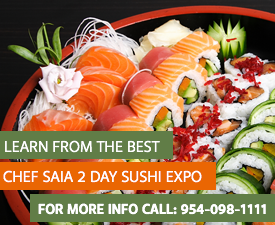
<style>
.page{position:relative;width:275px;height:225px}
.page>*{position:absolute;margin:0}
.t1{font:16px "Anago-Book";color:#ffffff}
.t2{font:14px "Anago-Bold";color:#ffffff}
</style>
<div class="page">
<p class="t1" style="left:5px;top:140px;width:155px;height:13px">LEARN FROM THE BEST</p>
<p class="t1" style="left:3px;top:170px;width:199px;height:13px">CHEF SAIA 2 DAY SUSHI EXPO</p>
<p class="t2" style="left:38px;top:203px;width:228px;height:12px">FOR MORE INFO CALL: 954-098-1111</p>
</div>
